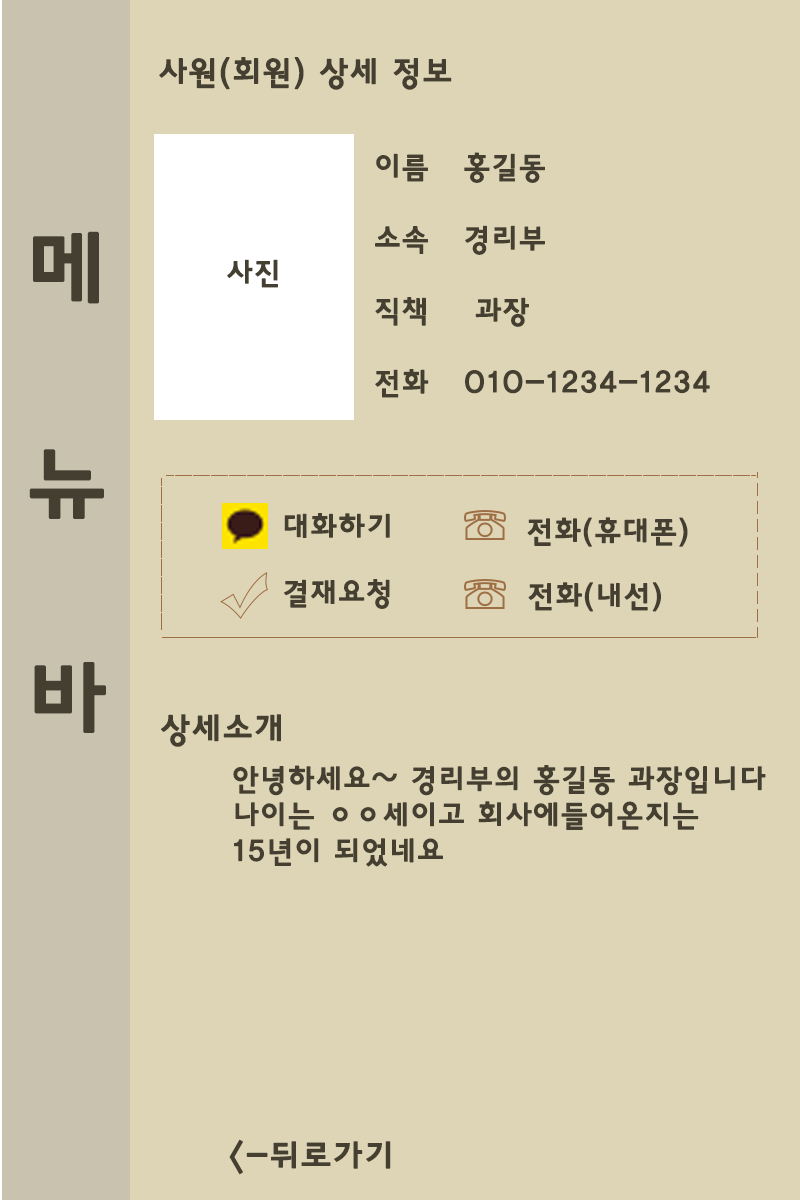
<style>
.page{position:relative;width:800px;height:1200px;background:#ded5b6}
.page>*{position:absolute;margin:0}
.t1{font:32.6px "HaanYGodic23";color:#443f30;font-weight:bold}
.t2{font:30px "HaanYGodic23";color:#443f30;font-weight:bold}
.t3{font:89.6px "HaanYGodic23";color:#443f30;font-weight:bold}
.t4{font:29.9px "HaanYGodic23";color:#443f30;font-weight:bold}
.t5{font:29.8px "HaanYGodic23";color:#443f30;font-weight:bold}
.t6{font:33.6px "HaanYGodic23";color:#443f30;font-weight:bold}
.t7{font:34.5px "HaanYGodic23";color:#443f30;font-weight:bold}
</style>
<div class="page">
<p class="t1" style="left:159px;top:57px;width:293px;height:33px">사원(회원) 상세 정보</p>
<p class="t2" style="left:375px;top:152px;width:335px;height:246px">이름   홍길동<br><br>소속   경리부<br><br>직책    과장<br> <br>전화   010-1234-1234</p>
<p class="t3" style="left:29px;top:231px;width:77px;height:502px">메<br><br>뉴<br><br>바</p>
<p class="t2" style="left:227px;top:259px;width:51px;height:29px">사진</p>
<p class="t2" style="left:284px;top:513px;width:106px;height:25px">대화하기</p>
<p class="t4" style="left:527px;top:517px;width:161px;height:30px">전화(휴대폰)</p>
<p class="t2" style="left:284px;top:579px;width:106px;height:30px">결재요청</p>
<p class="t5" style="left:528px;top:582px;width:133px;height:30px">전화(내선)</p>
<p class="t6" style="left:161px;top:714px;width:120px;height:33px">상세소개</p>
<p class="t2" style="left:233px;top:765px;width:533px;height:102px">안녕하세요~ 경리부의 홍길동 과장입니다<br>나이는 ㅇㅇ세이고 회사에들어온지는<br>15년이 되었네요</p>
<p class="t7" style="left:229px;top:1139px;width:162px;height:36px">&lt;-뒤로가기</p>
</div>
